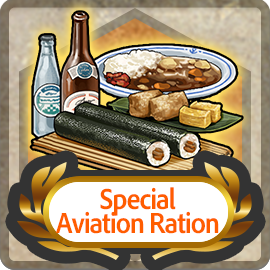
<style>
.page{position:relative;width:270px;height:270px}
.page>*{position:absolute;margin:0}
.t1{font:30px/24px "AdobeClean-Bold";letter-spacing:-0.04em;color:#ff5d00;scale:0.9 1}
</style>
<div class="page">
<p class="t1" style="left:56px;top:187px;width:163px;height:47px;text-align:center">Special<br>Aviation Ration</p>
</div>
